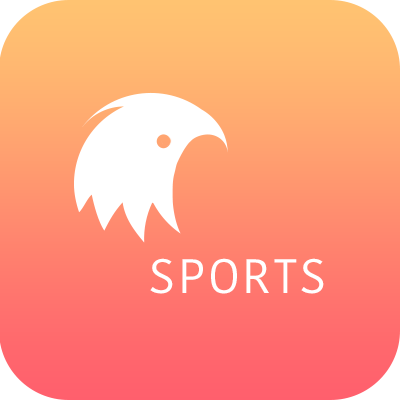
<style>
.page{position:relative;width:400px;height:400px}
.page>*{position:absolute;margin:0}
.t1{font:48px "KohinoorDevanagari-Regular";letter-spacing:0.06em;color:#ffffff}
</style>
<div class="page">
<p class="t1" style="left:150px;top:258px;width:174px;height:36px">SPORTS</p>
</div>
